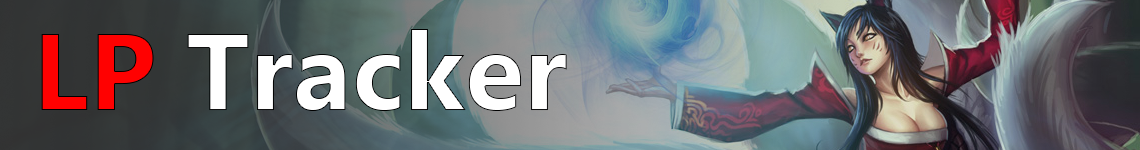
<style>
.page{position:relative;width:1140px;height:150px}
.page>*{position:absolute;margin:0}
.t1{font:109px "Ebrima-Bold";color:#ffffff}
.t2{font:109px "Ebrima-Bold";color:#ff0101}
</style>
<div class="page">
<p class="t1" style="left:41px;top:29px;width:526px;height:82px"><span class="t2">LP</span> Tracker</p>
</div>
